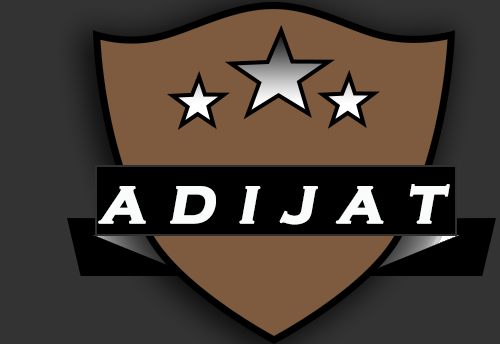
<style>
.page{position:relative;width:500px;height:344px;background:#7e5b3f}
.page>*{position:absolute;margin:0}
.t1{font:65.3px "CopperplateGothic-Bold";letter-spacing:0.33em;color:#fafbfb;font-weight:bold;font-style:italic}
</style>
<div class="page">
<p class="t1" style="left:98px;top:184px;width:352px;height:41px">adijat</p>
</div>
